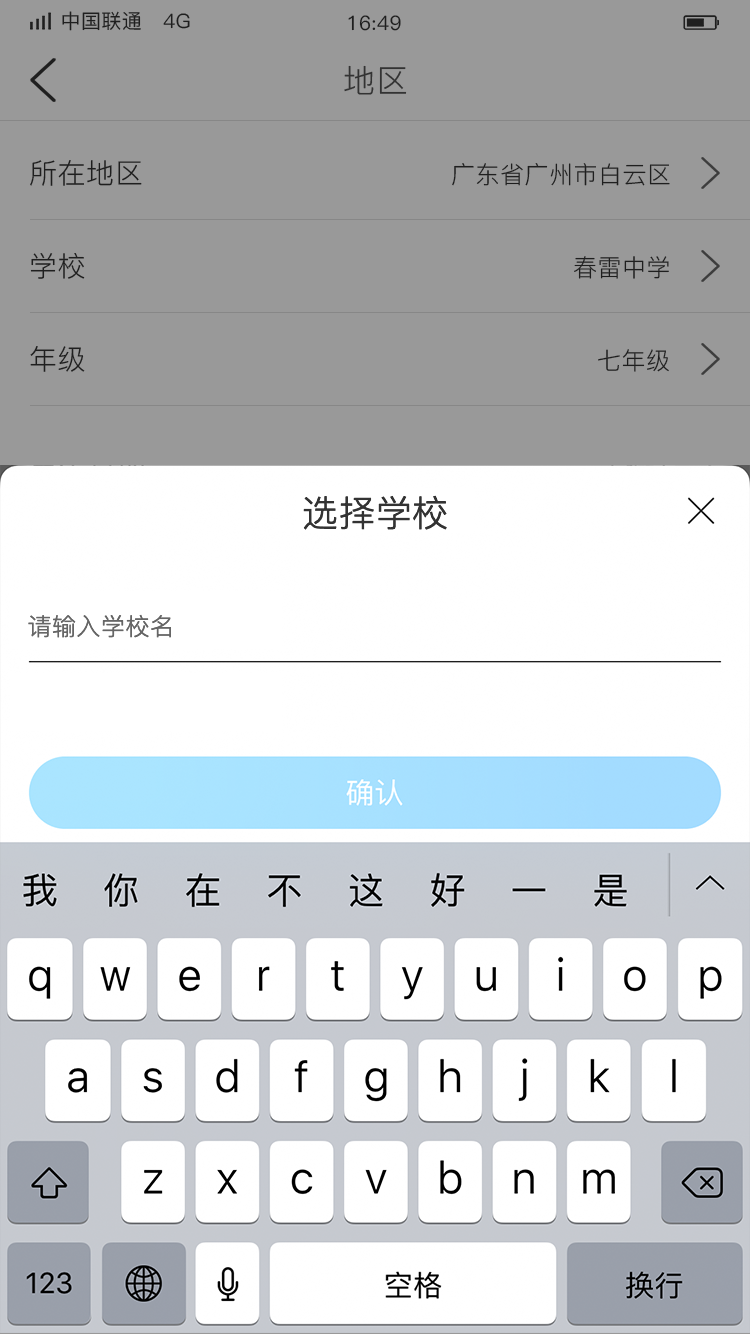
<style>
.page{position:relative;width:750px;height:1334px;background:#999999}
.page>*{position:absolute;margin:0}
.t1{font:20px "PingFang-SC-Medium";letter-spacing:0.02em;color:#333333}
.t2{font:32px "PingFang-SC-Regular";letter-spacing:0.02em;color:#333333}
.t3{font:28px "PingFang-SC-Regular";letter-spacing:0.02em;color:#333333}
.t4{font:24px "PingFang-SC-Regular";letter-spacing:0.02em;color:#333333}
.t5{font:36px "PingFang-SC-Regular";letter-spacing:0.02em;color:#333333}
.t6{font:24px "PingFang-SC-Regular";letter-spacing:0.02em;color:#666666}
</style>
<div class="page">
<p class="t1" style="left:62px;top:11px;width:128px;height:20px">中国联通   4G</p>
<p class="t1" style="left:348px;top:15px;width:53px;height:16px">16:49</p>
<p class="t2" style="left:344px;top:65px;width:63px;height:30px">地区</p>
<p class="t3" style="left:30px;top:160px;width:112px;height:26px">所在地区</p>
<p class="t4" style="left:452px;top:163px;width:218px;height:23px">广东省广州市白云区</p>
<p class="t3" style="left:30px;top:253px;width:55px;height:26px">学校</p>
<p class="t4" style="left:574px;top:256px;width:95px;height:23px">春雷中学</p>
<p class="t3" style="left:30px;top:346px;width:55px;height:26px">年级</p>
<p class="t4" style="left:598px;top:349px;width:71px;height:23px">七年级</p>
<p class="t5" style="left:303px;top:495px;width:144px;height:35px">选择学校</p>
<p class="t6" style="left:28px;top:614px;width:143px;height:24px">请输入学校名</p>
</div>
